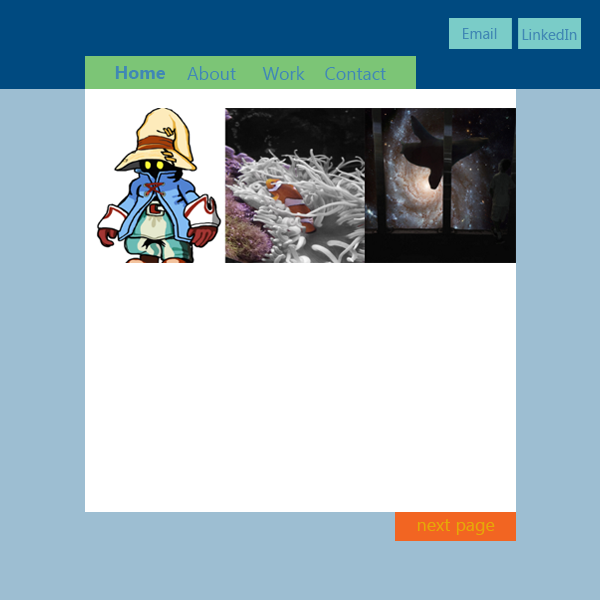
<style>
.page{position:relative;width:600px;height:600px;background:#ffffff}
.page>*{position:absolute;margin:0}
.t1{font:15.1px "Gadugi";color:#4088b4}
.t2{font:18px "Gadugi-Bold";color:#4088b4}
.t3{font:18px "Gadugi";color:#4088b4}
.t4{font:18px "Gadugi";color:#e6a906}
</style>
<div class="page">
<p class="t1" style="left:463px;top:28px;width:34px;height:11px">Email</p>
<p class="t1" style="left:522px;top:29px;width:55px;height:11px">LinkedIn</p>
<p class="t2" style="left:115px;top:66px;width:50px;height:13px">Home</p>
<p class="t3" style="left:187px;top:66px;width:49px;height:14px">About</p>
<p class="t3" style="left:262px;top:66px;width:43px;height:14px">Work</p>
<p class="t3" style="left:325px;top:67px;width:61px;height:13px">Contact</p>
<p class="t4" style="left:417px;top:519px;width:78px;height:16px">next page</p>
</div>
